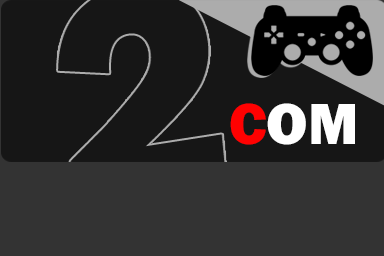
<style>
.page{position:relative;width:384px;height:256px;background:#161616}
.page>*{position:absolute;margin:0}
.t1{font:60px "FranklinGothic-Heavy";color:#ffffff}
.t2{font:60px "FranklinGothic-Heavy";color:#ff0101}
</style>
<div class="page">
<p class="t1" style="left:230px;top:103px;width:125px;height:42px"><span class="t2">C</span>OM</p>
</div>
